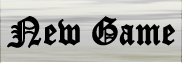
<style>
.page{position:relative;width:182px;height:63px}
.page>*{position:absolute;margin:0}
.t1{font:38px "OldEnglishTextMT";letter-spacing:0.005em;color:#000000;font-weight:bold;scale:0.89 1}
</style>
<div class="page">
<p class="t1" style="left:7px;top:16px;width:168px;height:32px">New Game</p>
</div>
